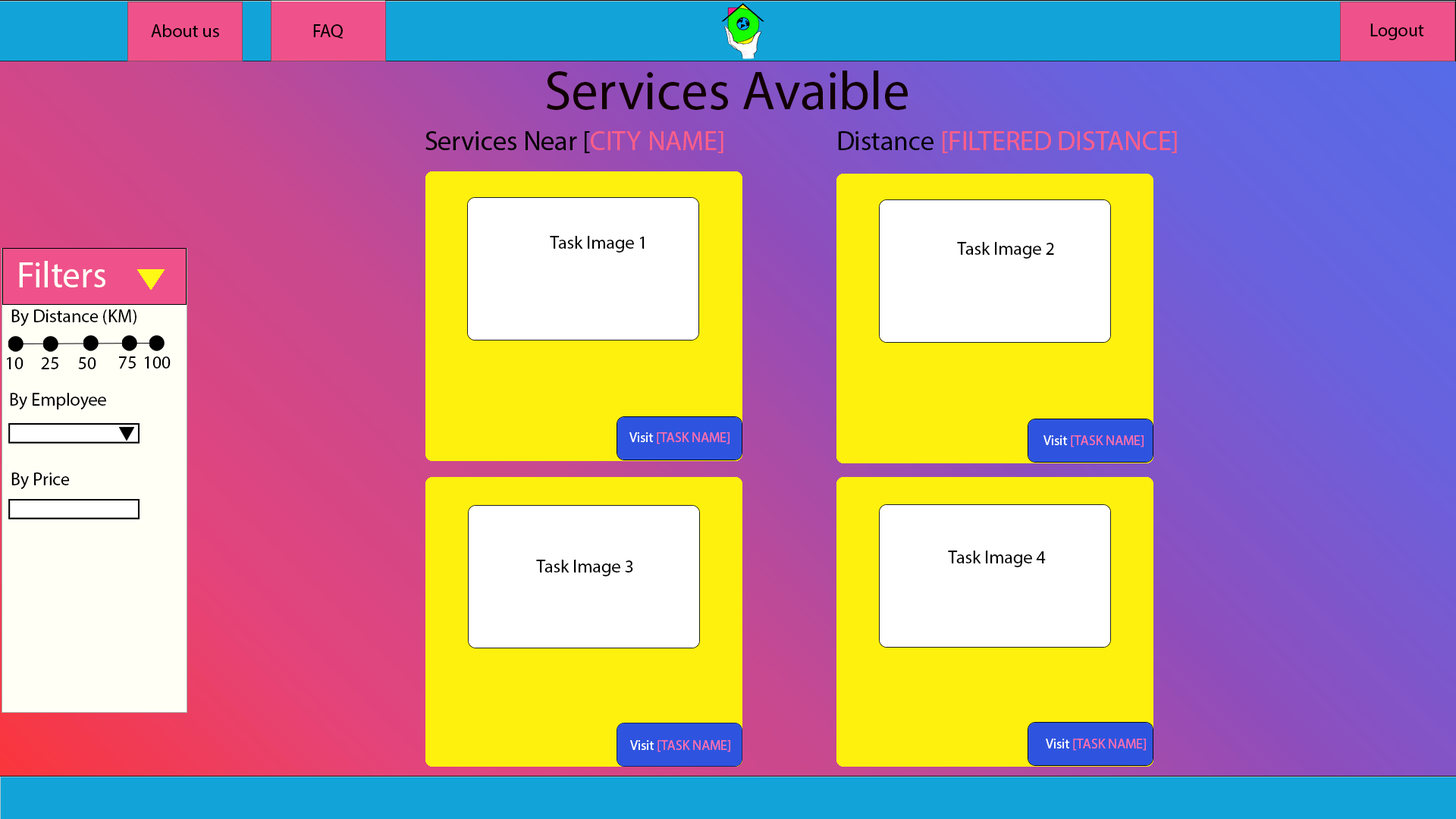
<style>
.page{position:relative;width:1456px;height:819px}
.page>*{position:absolute;margin:0}
.t1{font:18.2px "MyriadPro-Regular";color:#000000}
.t2{font:54.6px "MyriadPro-Regular";color:#110000}
.t3{font:27.3px "MyriadPro-Regular";color:#ff5f89}
.t4{font:27.3px "MyriadPro-Regular";color:#000000}
.t5{font:36.4px "MyriadPro-Regular";color:#fffff6}
.t6{font:13.6px "MyriadPro-Regular";color:#ff70ab}
.t7{font:13.6px "MyriadPro-Regular";color:#ffffff}
</style>
<div class="page">
<p class="t1" style="left:151px;top:24px;width:68px;height:13px">About us</p>
<p class="t1" style="left:313px;top:24px;width:30px;height:15px">FAQ</p>
<p class="t1" style="left:1370px;top:24px;width:54px;height:16px">Logout</p>
<p class="t2" style="left:547px;top:71px;width:361px;height:39px">Services Avaible</p>
<p class="t3" style="left:838px;top:131px;width:339px;height:22px"><span class="t4">Distance </span>[FILTERED DISTANCE]</p>
<p class="t1" style="left:550px;top:236px;width:95px;height:17px">Task Image 1</p>
<p class="t1" style="left:957px;top:242px;width:97px;height:17px">Task Image 2</p>
<p class="t5" style="left:19px;top:261px;width:86px;height:26px">Filters</p>
<p class="t1" style="left:11px;top:309px;width:125px;height:17px">By Distance (KM)</p>
<p class="t1" style="left:7px;top:357px;width:17px;height:12px">10</p>
<p class="t1" style="left:41px;top:357px;width:17px;height:12px">25</p>
<p class="t1" style="left:78px;top:357px;width:18px;height:12px">50</p>
<p class="t1" style="left:118px;top:356px;width:18px;height:13px">75</p>
<p class="t1" style="left:145px;top:356px;width:26px;height:13px">100</p>
<p class="t1" style="left:10px;top:393px;width:96px;height:16px">By Employee</p>
<p class="t6" style="left:629px;top:432px;width:101px;height:12px"><span class="t7">Visit </span>[TASK NAME]</p>
<p class="t6" style="left:1043px;top:435px;width:101px;height:12px"><span class="t7">Visit </span>[TASK NAME]</p>
<p class="t1" style="left:11px;top:472px;width:59px;height:17px">By Price</p>
<p class="t1" style="left:948px;top:551px;width:98px;height:16px">Task Image 4</p>
<p class="t1" style="left:536px;top:560px;width:97px;height:16px">Task Image 3</p>
<p class="t6" style="left:630px;top:740px;width:100px;height:12px"><span class="t7">Visit </span>[TASK NAME]</p>
<p class="t6" style="left:1046px;top:739px;width:100px;height:12px"><span class="t7">Visit </span>[TASK NAME]</p>
</div>
